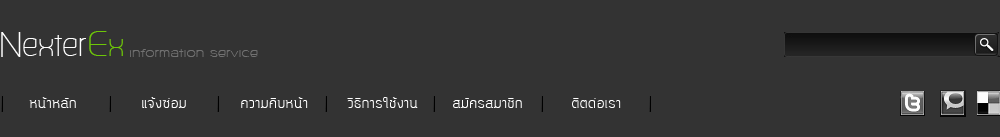
<style>
.page{position:relative;width:1000px;height:137px;background:#333333}
.page>*{position:absolute;margin:0}
.t1{font:50px "Kunlasatri-Light";color:#ffffff}
.t2{font:40px "Kunlasatri-Light";color:#ffffff}
.t3{font:50px "Kunlasatri-Light";color:#6dc608}
.t4{font:40px "Kunlasatri-Light";color:#6dc608}
.t5{font:14px "Kunlasatri-Light";color:#717171;scale:1.5 1}
.t6{font:18px "Kunlasatri";letter-spacing:0.03em;color:#ffffff}
</style>
<div class="page">
<p class="t1" style="left:1px;top:32px;width:20px;height:25px">N</p>
<p class="t2" style="left:23px;top:35px;width:63px;height:21px">exter</p>
<p class="t3" style="left:89px;top:31px;width:18px;height:25px">E</p>
<p class="t4" style="left:109px;top:39px;width:14px;height:17px">x</p>
<p class="t5" style="left:129px;top:49px;width:129px;height:8px">information service</p>
<p class="t6" style="left:29px;top:97px;width:47px;height:11px">หน้าหลัก</p>
<p class="t6" style="left:142px;top:97px;width:44px;height:11px">แจ้งซ่อม</p>
<p class="t6" style="left:241px;top:97px;width:67px;height:11px">ความคืบหน้า</p>
<p class="t6" style="left:347px;top:97px;width:71px;height:11px">วิธีการใช้งาน</p>
<p class="t6" style="left:453px;top:98px;width:69px;height:10px">สมัครสมาชิก</p>
<p class="t6" style="left:572px;top:98px;width:49px;height:10px">ติตด่อเรา</p>
</div>
